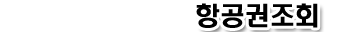
<style>
.page{position:relative;width:339px;height:32px;background:#ffffff}
.page>*{position:absolute;margin:0}
.t1{font:25px "H2hdrM";color:#000000}
</style>
<div class="page">
<p class="t1" style="left:196px;top:3px;width:122px;height:25px">항공권조회</p>
</div>
